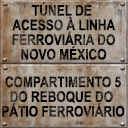
<style>
.page{position:relative;width:128px;height:128px}
.page>*{position:absolute;margin:0}
.t1{font:14.7px/14.7px "Arial-BoldMT";text-transform:uppercase;scale:0.82 1}
</style>
<div class="page">
<p class="t1" style="left:12px;top:2px;width:104px;height:58px;text-align:center">Túnel de <br>acesso à linha<br>ferroviária do<br>Novo México</p>
<p class="t1" style="left:2px;top:76px;width:123px;height:41px;text-align:center">Compartimento 5<br>do reboque do <br>pátio ferroviário</p>
</div>
